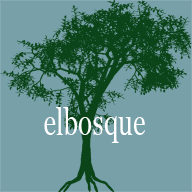
<style>
.page{position:relative;width:192px;height:192px;background:#77a0a8}
.page>*{position:absolute;margin:0}
.t1{font:37.4px "Georgia";color:#ffffff;scale:0.69 1}
</style>
<div class="page">
<p class="t1" style="left:44px;top:107px;width:101px;height:36px">elbosque</p>
</div>
